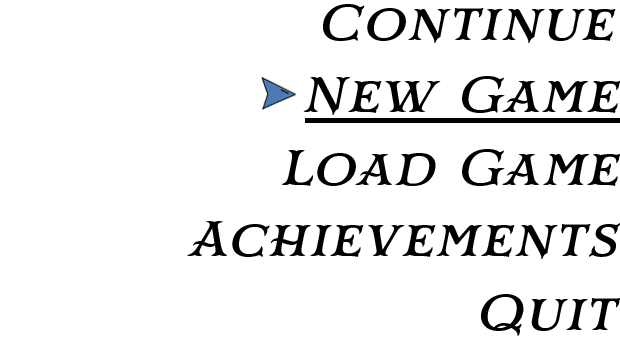
<style>
.page{position:relative;width:620px;height:340px;background:#ffffff}
.page>*{position:absolute;margin:0}
.t1{font:50px "MrDarcy-Med";letter-spacing:0.04em;color:#000000;font-style:italic;scale:1.12 1}
</style>
<div class="page">
<p class="t1" style="left:323px;top:4px;width:293px;height:39px">Continue</p>
<p class="t1" style="left:303px;top:76px;width:318px;height:39px">New Game</p>
<p class="t1" style="left:281px;top:149px;width:340px;height:37px">Load Game</p>
<p class="t1" style="left:187px;top:221px;width:434px;height:38px">Achievements</p>
<p class="t1" style="left:481px;top:294px;width:140px;height:42px">Quit</p>
</div>
